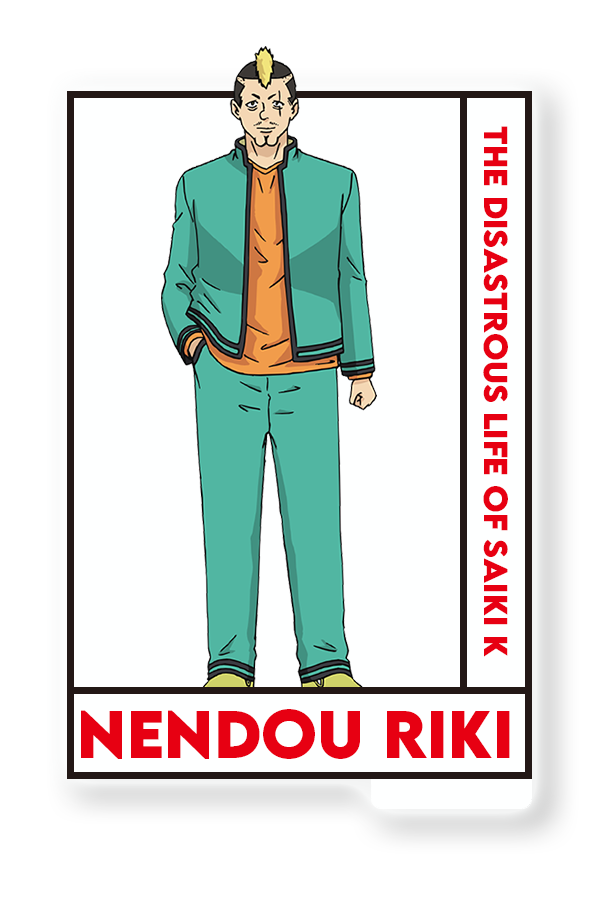
<style>
.page{position:relative;width:600px;height:900px;background:#feffff}
.page>*{position:absolute;margin:0}
.t1{font:29.6px "LEMONMILK-Bold";color:#e70012}
.t2{font:60.3px "LEMONMILK-Bold";color:#e70012}
</style>
<div class="page">
<p class="t1" style="left:483px;top:126px;width:25px;height:531px;rotate:90deg">THE disastrous Life of saiki K</p>
<p class="t2" style="left:81px;top:709px;width:429px;height:50px">Nendou RIKI</p>
</div>
